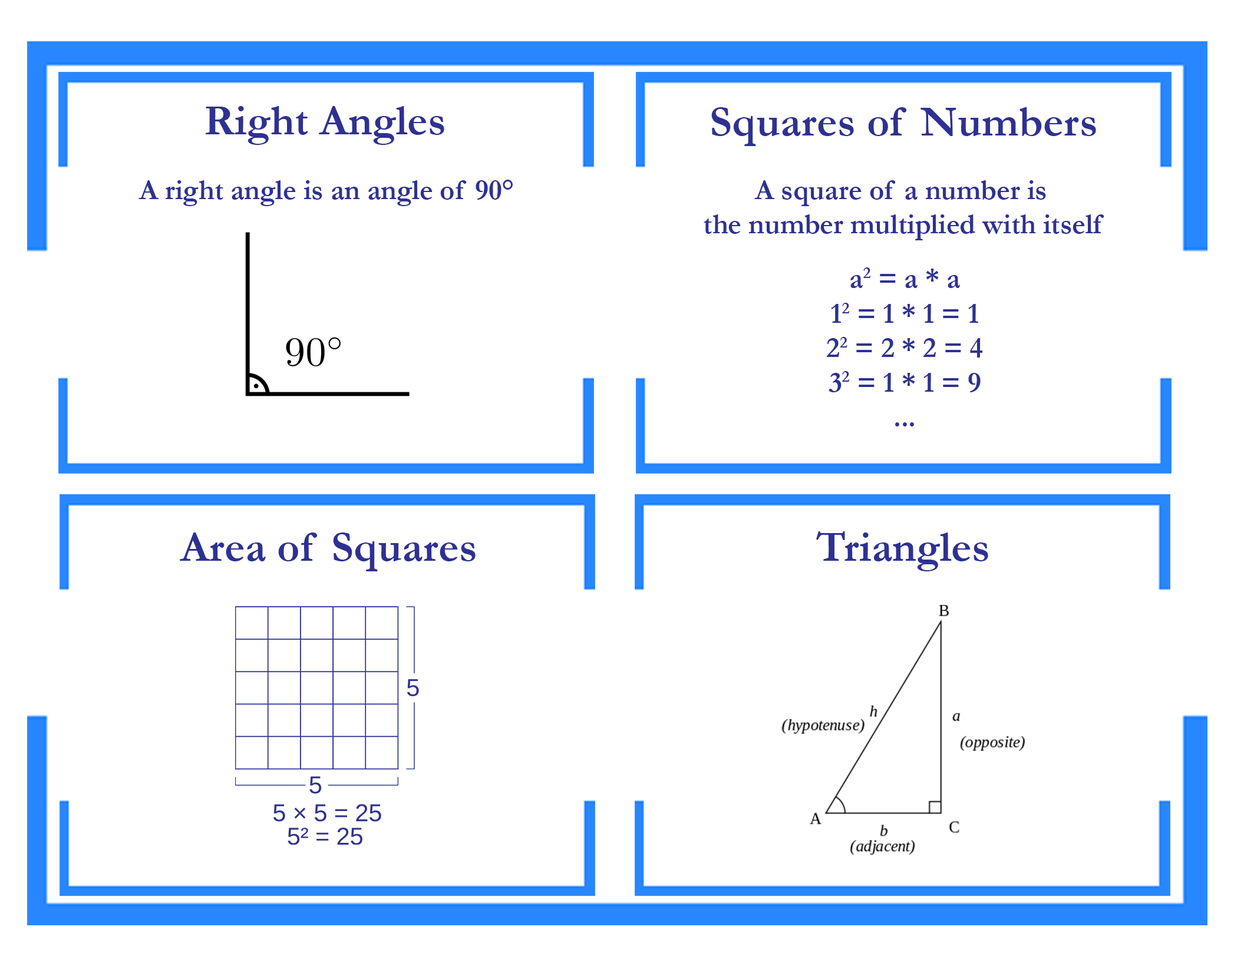
<style>
.page{position:relative;width:1234px;height:966px;background:#ffffff}
.page>*{position:absolute;margin:0}
.t1{font:43.7px "Garamond-Bold";color:#2e3192}
.t2{font:43.5px "Garamond-Bold";color:#2e3192}
.t3{font:28.6px "Garamond-Bold";color:#2e3192}
</style>
<div class="page">
<p class="t1" style="left:205px;top:106px;width:239px;height:39px">Right Angles</p>
<p class="t2" style="left:711px;top:107px;width:385px;height:39px">Squares of Numbers</p>
<p class="t3" style="left:138px;top:180px;width:375px;height:26px">A right angle is an angle of 90°</p>
<p class="t3" style="left:704px;top:180px;width:400px;height:60px;text-align:center">A square of a number is <br>the number multiplied with itself</p>
<p class="t3" style="left:850px;top:268px;width:110px;height:20px">a2 = a * a</p>
<p class="t3" style="left:826px;top:303px;width:156px;height:124px;text-align:center">12 = 1 * 1 = 1<br>22 = 2 * 2 = 4<br>32 = 1 * 1 = 9<br>...</p>
<p class="t2" style="left:180px;top:533px;width:296px;height:39px">Area of Squares</p>
<p class="t2" style="left:816px;top:532px;width:172px;height:40px">Triangles</p>
</div>
